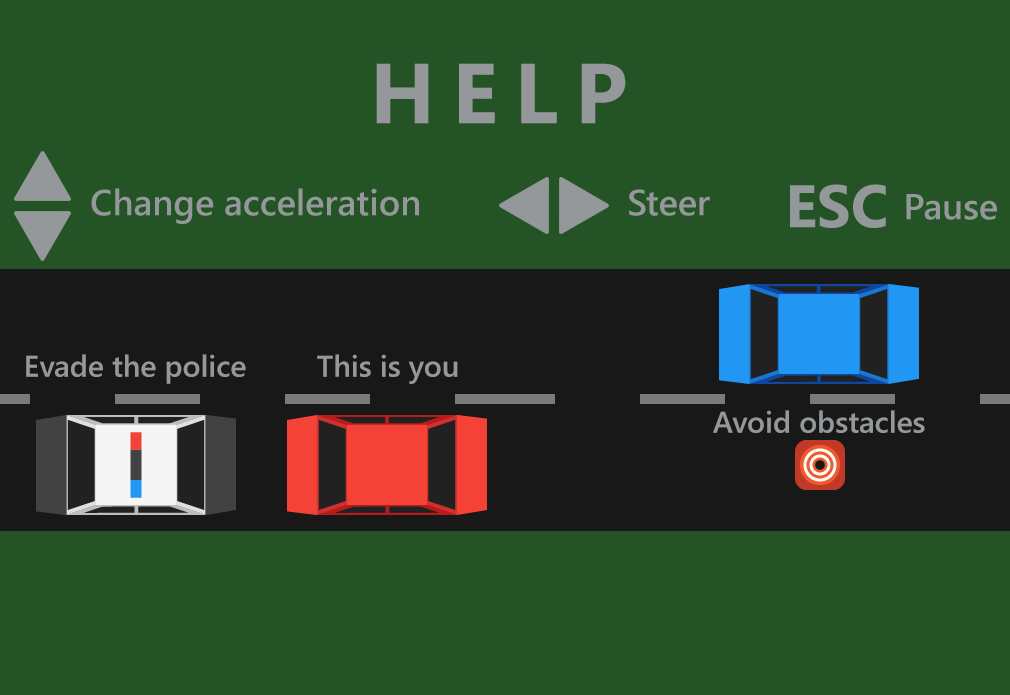
<style>
.page{position:relative;width:1010px;height:695px;background:#245426}
.page>*{position:absolute;margin:0}
.t1{font:85px "SegoeUI-Bold";letter-spacing:0.2em;color:#95989a}
.t2{font:30px "SegoeUI-Semibold";color:#95989a}
</style>
<div class="page">
<p class="t1" style="left:376px;top:63px;width:250px;height:61px">HELP</p>
<p class="t2" style="left:26px;top:354px;width:220px;height:30px">Evade the police</p>
<p class="t2" style="left:317px;top:354px;width:141px;height:30px">This is you</p>
<p class="t2" style="left:713px;top:410px;width:212px;height:23px">Avoid obstacles</p>
</div>
